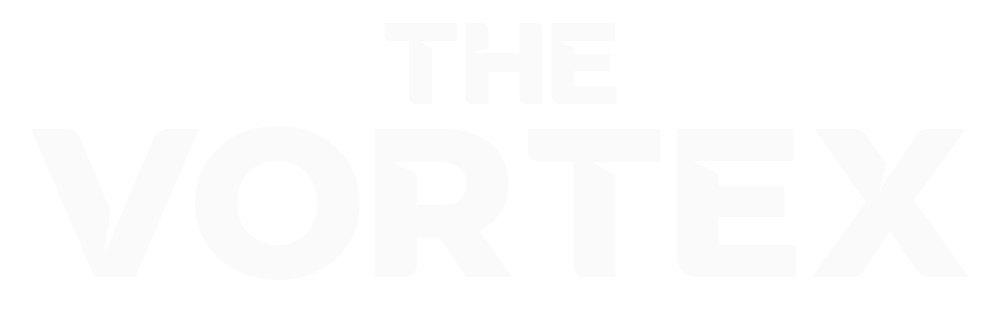
<style>
.page{position:relative;width:1000px;height:309px;background:#ffffff}
.page>*{position:absolute;margin:0}
.t1{font:147.1px "WallmanLoveBold";color:#fafafa}
.t2{font:268.8px "WallmanLoveBold";color:#fafafa}
</style>
<div class="page">
<p class="t1" style="left:384px;top:23px;width:233px;height:81px">THE</p>
<p class="t2" style="left:31px;top:126px;width:938px;height:154px">VORTEX</p>
</div>
